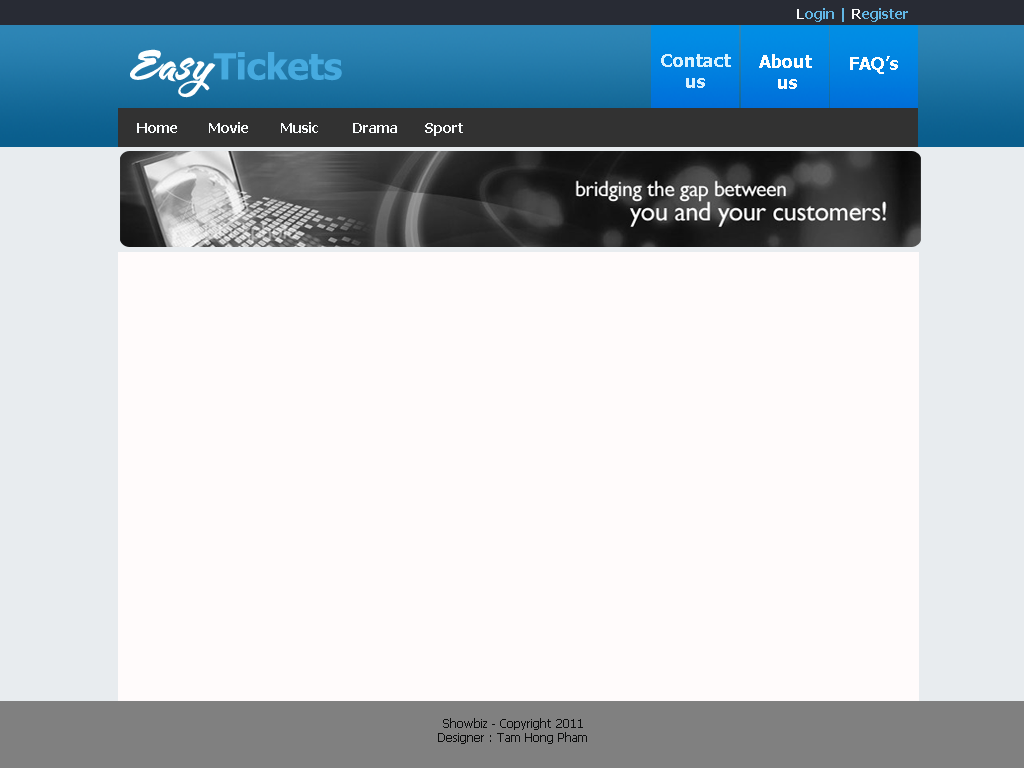
<style>
.page{position:relative;width:1024px;height:768px;background:#fffbfb}
.page>*{position:absolute;margin:0}
.t1{font:14px "Tahoma-Bold";color:#62b7e5}
.t2{font:14px "Tahoma-Bold";color:#f9fcfd}
.t3{font:14px "Tahoma-Bold";color:#f8fafb}
.t4{font:36px "Tahoma-Bold";color:#46aadf}
.t5{font:36px "VNI-Butlong";color:#feffff}
.t6{font:18px "Tahoma-Bold";color:#daf2ff}
.t7{font:18px "Tahoma-Bold";color:#ffffff}
.t8{font:12px "Tahoma";color:#0b0c0c}
</style>
<div class="page">
<p class="t1" style="left:797px;top:8px;width:111px;height:14px"><span class="t2">L</span>ogin | <span class="t3">R</span>egister</p>
<p class="t4" style="left:130px;top:49px;width:212px;height:49px"><span class="t5">Easy</span>Tickets</p>
<p class="t6" style="left:661px;top:54px;width:70px;height:34px;text-align:center">Contact<br>us</p>
<p class="t7" style="left:759px;top:54px;width:53px;height:35px;text-align:center">About <br>us</p>
<p class="t7" style="left:850px;top:56px;width:48px;height:18px">FAQ’s</p>
<p class="t2" style="left:137px;top:122px;width:326px;height:14px">Home Movie Music Drama Sport</p>
<p class="t8" style="left:438px;top:718px;width:149px;height:26px;text-align:center">Showbiz - Copyright 2011 <br>Designer : Tam Hong Pham</p>
</div>
